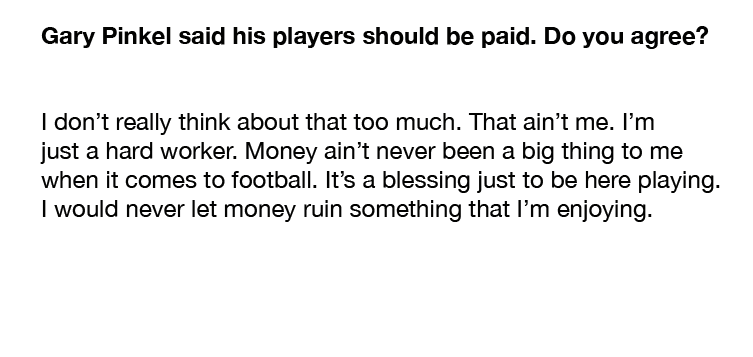
<style>
.page{position:relative;width:753px;height:357px;background:#ffffff}
.page>*{position:absolute;margin:0}
.t1{font:24px "HelveticaNeue";color:#020201}
.t2{font:24px "HelveticaNeue-Bold";color:#020201}
</style>
<div class="page">
<p class="t1" style="left:40px;top:26px;width:680px;height:196px"><span class="t2">Gary Pinkel said his players should be paid. Do you agree?<br></span><br><br>I don’t really think about that too much. That ain’t me. I’m <br>just a hard worker. Money ain’t never been a big thing to me <br>when it comes to football. It’s a blessing just to be here playing. <br>I would never let money ruin something that I’m enjoying.</p>
</div>
